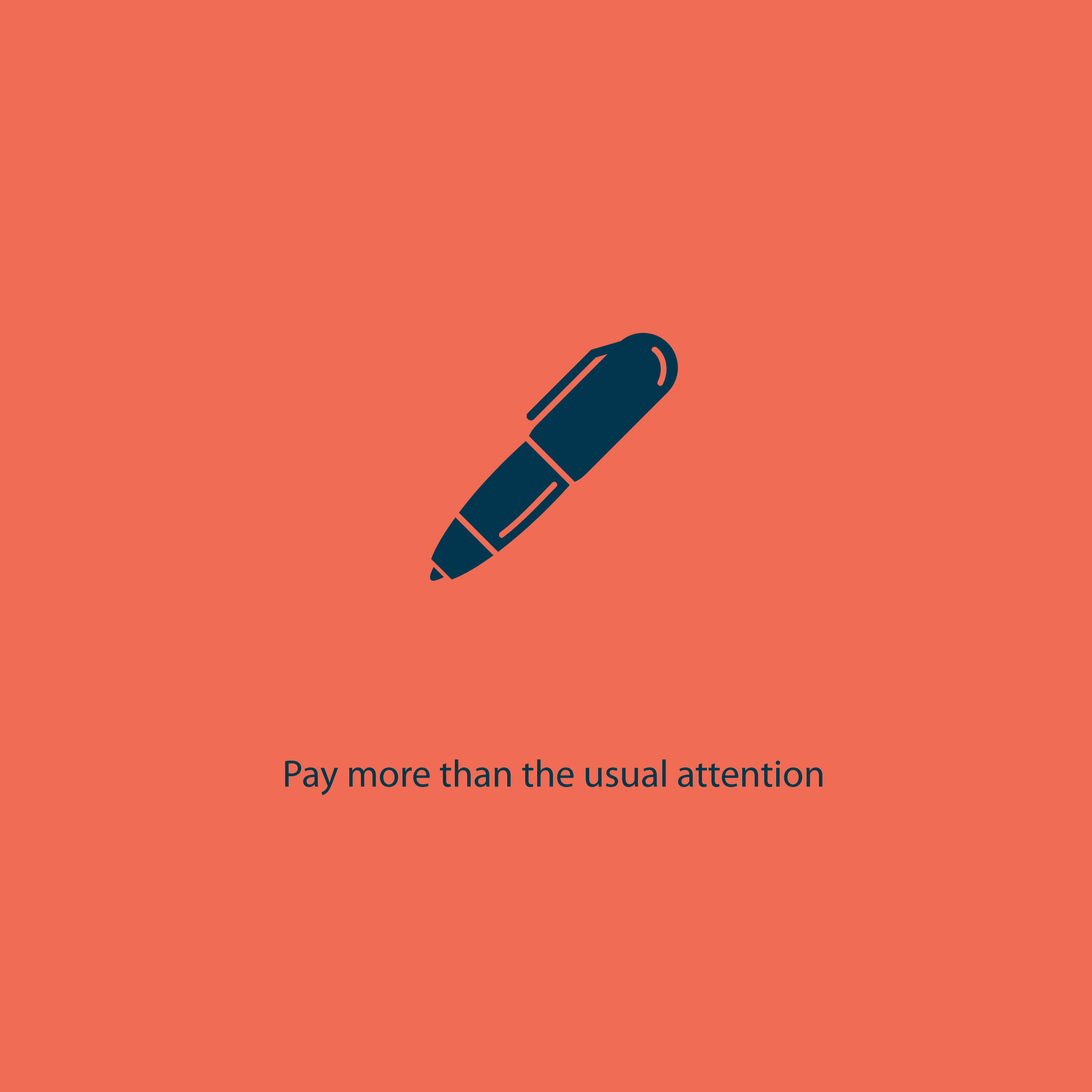
<style>
.page{position:relative;width:1092px;height:1092px;background:#f06c55}
.page>*{position:absolute;margin:0}
.t1{font:38.5px "MyriadPro-Regular";color:#023749}
</style>
<div class="page">
<p class="t1" style="left:285px;top:759px;width:538px;height:36px">Pay more than the usual attention</p>
</div>
